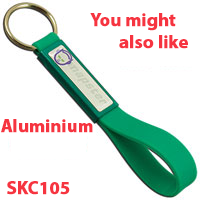
<style>
.page{position:relative;width:200px;height:200px;background:#ffffff}
.page>*{position:absolute;margin:0}
.t1{font:18px "MyriadPro-Bold";color:#f63440;font-weight:bold}
</style>
<div class="page">
<p class="t1" style="left:90px;top:13px;width:98px;height:36px">You might<br>       also like</p>
<p class="t1" style="left:1px;top:119px;width:92px;height:14px">Aluminium</p>
<p class="t1" style="left:7px;top:181px;width:63px;height:14px">SKC105</p>
</div>
